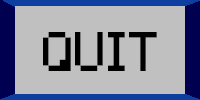
<style>
.page{position:relative;width:200px;height:100px;background:#c0c0c0}
.page>*{position:absolute;margin:0}
.t1{font:89.2px "Pixeltype";letter-spacing:-0.011em;color:#000000}
</style>
<div class="page">
<p class="t1" style="left:43px;top:32px;width:114px;height:39px">QUIT</p>
</div>
